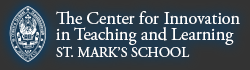
<style>
.page{position:relative;width:250px;height:70px}
.page>*{position:absolute;margin:0}
.t1{font:18px/16px "AGaramondPro-Regular";color:#ffffff}
.t2{font:14px "AGaramondPro-Regular";color:#ffffff}
</style>
<div class="page">
<p class="t1" style="left:56px;top:11px;width:184px;height:46px">The Center for Innovation<br>in Teaching and Learning<br><span class="t2">ST. MARK’S SCHOOL</span></p>
</div>
